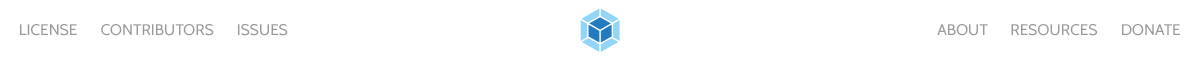
<style>
.page{position:relative;width:1200px;height:60px;background:#ffffff}
.page>*{position:absolute;margin:0}
.t1{font:15.6px "Cabin-Regular";color:#999999}
</style>
<div class="page">
<p class="t1" style="left:20px;top:24px;width:57px;height:12px">LICENSE</p>
<p class="t1" style="left:101px;top:24px;width:113px;height:12px">CONTRIBUTORS</p>
<p class="t1" style="left:238px;top:24px;width:50px;height:12px">ISSUES</p>
<p class="t1" style="left:937px;top:24px;width:51px;height:12px">ABOUT</p>
<p class="t1" style="left:1011px;top:24px;width:86px;height:12px">RESOURCES</p>
<p class="t1" style="left:1122px;top:24px;width:58px;height:12px">DONATE</p>
</div>
